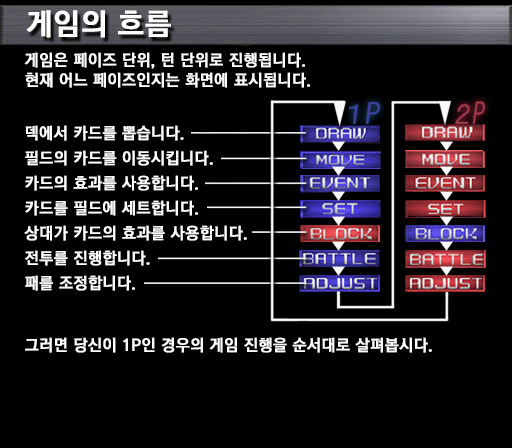
<style>
.page{position:relative;width:512px;height:448px;background:#000000}
.page>*{position:absolute;margin:0}
.t1{font:30px "KoreanGD15-R";color:#ffffff;font-weight:bold}
.t2{font:16px/20px "KoreanGD15-R";color:#ffffff;font-weight:bold}
.t3{font:16px/25px "KoreanGD15-R";color:#ffffff;font-weight:bold}
.t4{font:16px "KoreanGD15-R";color:#ffffff;font-weight:bold}
</style>
<div class="page">
<p class="t1" style="left:26px;top:10px;width:145px;height:28px">게임의 흐름</p>
<p class="t2" style="left:24px;top:52px;width:286px;height:36px">게임은 페이즈 단위, 턴 단위로 진행됩니다.<br>현재 어느 페이즈인지는 화면에 표시됩니다.</p>
<p class="t3" style="left:24px;top:125px;width:223px;height:166px">덱에서 카드를 뽑습니다.<br>필드의 카드를 이동시킵니다.<br>카드의 효과를 사용합니다.<br>카드를 필드에 세트합니다.   <br>상대가 카드의 효과를 사용합니다.                          <br>전투를 진행합니다.                                                   <br>패를 조정합니다.</p>
<p class="t4" style="left:25px;top:337px;width:407px;height:16px">그러면 당신이 1P인 경우의 게임 진행을 순서대로 살펴봅시다.</p>
</div>
